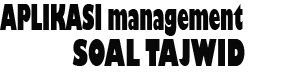
<style>
.page{position:relative;width:300px;height:80px;background:#ffffff}
.page>*{position:absolute;margin:0}
.t1{font:34.7px "GillSans-UltraBold";color:#050505;scale:0.48 1}
.t2{font:36px "GillSans-UltraBold";color:#080808;scale:0.58 1}
</style>
<div class="page">
<p class="t1" style="left:0px;top:4px;width:243px;height:32px">APLIKASI management</p>
<p class="t2" style="left:72px;top:39px;width:173px;height:27px">SOAL TAJWID</p>
</div>
